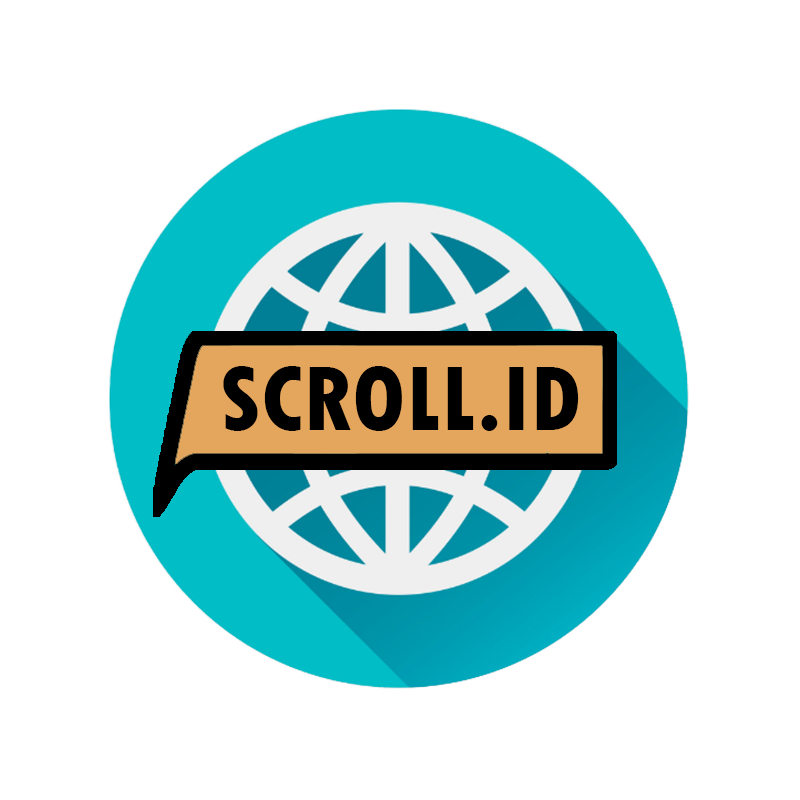
<style>
.page{position:relative;width:800px;height:800px;background:#ffffff}
.page>*{position:absolute;margin:0}
.t1{font:96px "TwCenMT-CondensedExtraBold";color:#000000}
</style>
<div class="page">
<p class="t1" style="left:223px;top:366px;width:356px;height:65px">SCROLL.ID</p>
</div>
